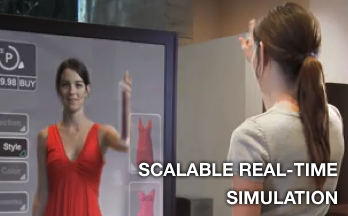
<style>
.page{position:relative;width:348px;height:216px}
.page>*{position:absolute;margin:0}
.t1{font:18px/28px "HelveticaNeue-Bold";color:#ffffff}
</style>
<div class="page">
<p class="t1" style="left:138px;top:162px;width:200px;height:43px;text-align:right">SCALABLE REAL-TIME<br>SIMULATION</p>
</div>
